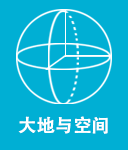
<style>
.page{position:relative;width:128px;height:150px;background:#00afd4}
.page>*{position:absolute;margin:0}
.t1{font:18px "AdobeHeitiStd-Regular";letter-spacing:-0.005em;color:#ffffff;font-weight:bold}
</style>
<div class="page">
<p class="t1" style="left:18px;top:116px;width:90px;height:18px">大地与空间</p>
</div>
